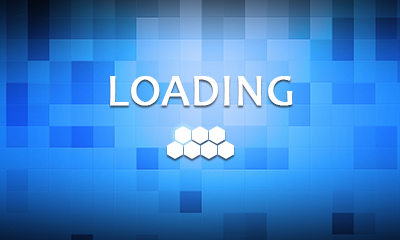
<style>
.page{position:relative;width:400px;height:240px}
.page>*{position:absolute;margin:0}
.t1{font:45px "Candara";color:#ffffff;font-weight:bold}
</style>
<div class="page">
<p class="t1" style="left:110px;top:76px;width:183px;height:30px">LOADING</p>
</div>
